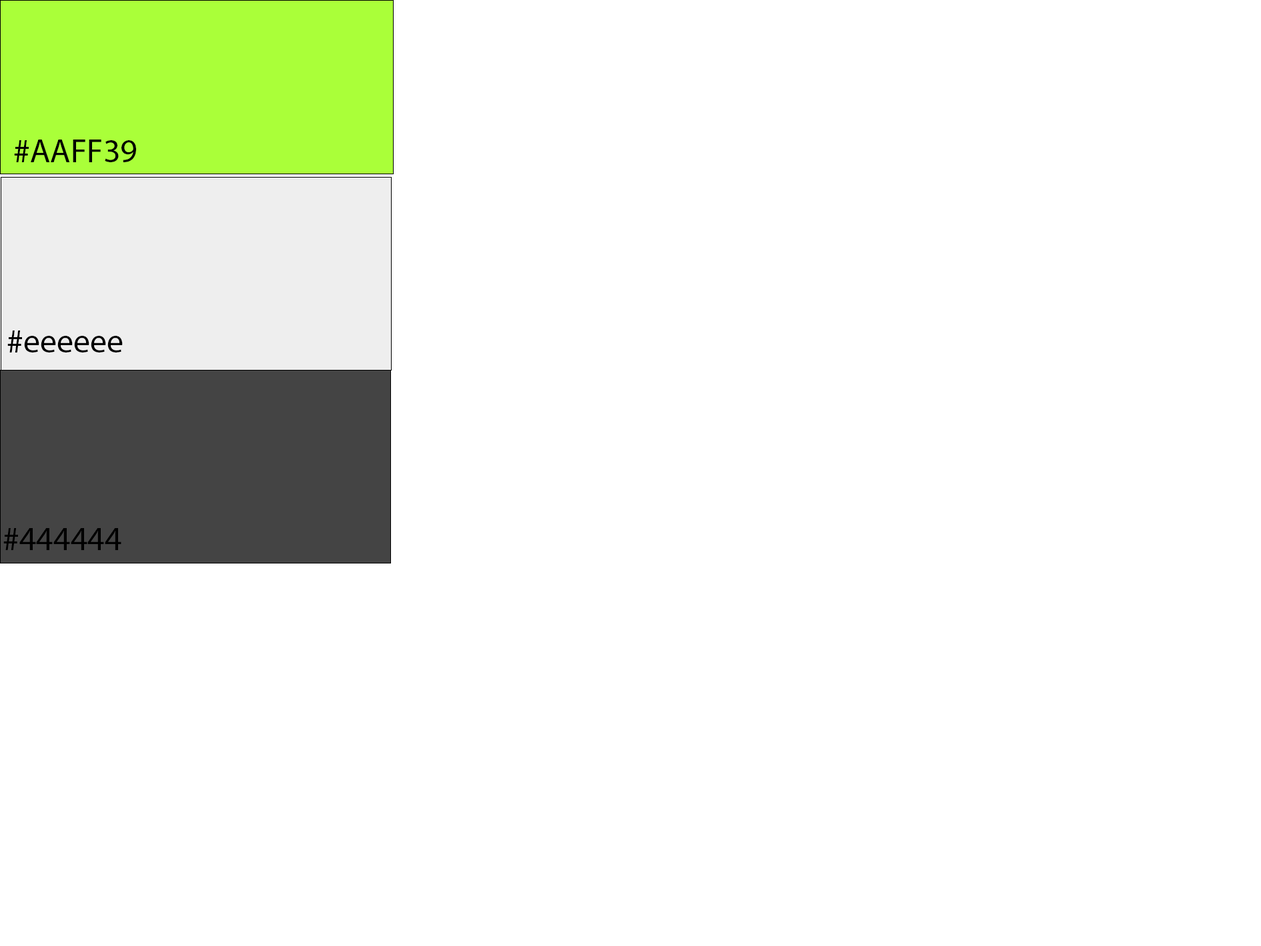
<style>
.page{position:relative;width:1261px;height:946px;background:#ffffff}
.page>*{position:absolute;margin:0}
.t1{font:33.4px "MyriadPro-Regular";color:#000000}
</style>
<div class="page">
<p class="t1" style="left:14px;top:139px;width:122px;height:23px">#AAFF39</p>
<p class="t1" style="left:7px;top:330px;width:116px;height:22px">#eeeeee</p>
<p class="t1" style="left:3px;top:528px;width:118px;height:22px">#444444</p>
</div>
